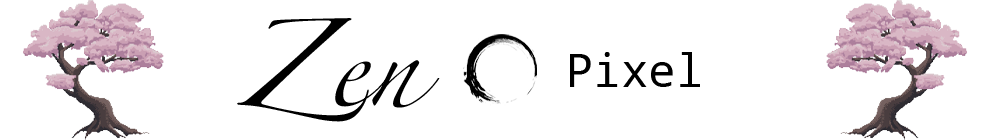
<style>
.page{position:relative;width:1000px;height:140px;background:#ffffff}
.page>*{position:absolute;margin:0}
.t1{font:78.9px "Zapfino";color:#000000}
.t2{font:45.8px "NotoMonoForPowerline";color:#000000}
</style>
<div class="page">
<p class="t1" style="left:237px;top:18px;width:203px;height:104px">Zen</p>
<p class="t2" style="left:570px;top:52px;width:130px;height:35px">Pixel</p>
</div>
